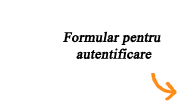
<style>
.page{position:relative;width:184px;height:102px;background:#ffffff}
.page>*{position:absolute;margin:0}
.t1{font:14px "IskoolaPota";color:#010101;font-weight:bold;font-style:italic}
</style>
<div class="page">
<p class="t1" style="left:63px;top:31px;width:98px;height:28px;text-align:center">Formular pentru<br> autentificare</p>
</div>
